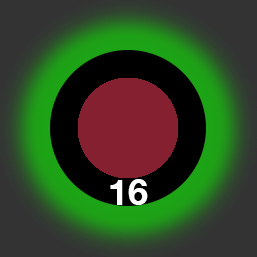
<style>
.page{position:relative;width:257px;height:257px}
.page>*{position:absolute;margin:0}
.t1{font:35.9px "HelveticaNeue-Bold";color:#ffffff}
</style>
<div class="page">
<p class="t1" style="left:110px;top:179px;width:38px;height:26px">16</p>
</div>
